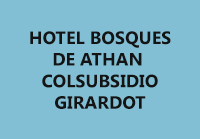
<style>
.page{position:relative;width:200px;height:139px;background:#82bed4}
.page>*{position:absolute;margin:0}
.t1{font:18px "SegoeUI-Bold";color:#141414}
</style>
<div class="page">
<p class="t1" style="left:30px;top:31px;width:141px;height:78px;text-align:center">HOTEL BOSQUES<br>DE ATHAN <br>COLSUBSIDIO<br>GIRARDOT</p>
</div>
